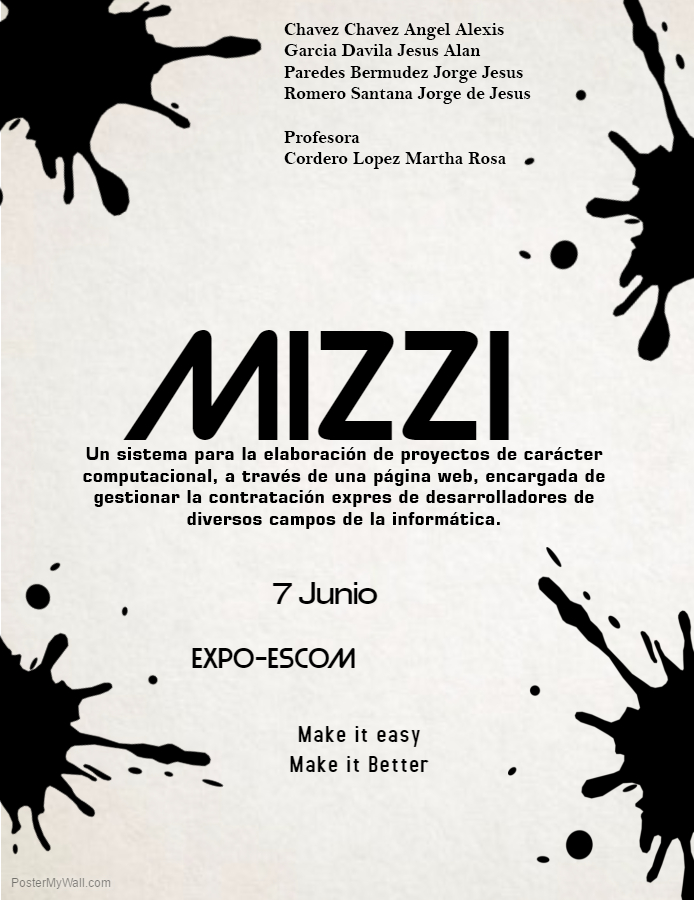
<style>
.page{position:relative;width:694px;height:900px}
.page>*{position:absolute;margin:0}
.t1{font:18px "BellMTBold";color:#000000}
.t2{font:18px "Square721BT-Bold";color:#000000}
</style>
<div class="page">
<p class="t1" style="left:284px;top:23px;width:247px;height:146px"><span class="t2"><br></span>Chavez Chavez Angel Alexis<br>Garcia Davila Jesus Alan<br>Paredes Bermudez Jorge Jesus<br>Romero Santana Jorge de Jesus<br><br>Profesora<br>Cordero Lopez Martha Rosa</p>
<p class="t2" style="left:83px;top:447px;width:522px;height:82px;text-align:center">Un sistema para la elaboración de proyectos de carácter computacional, a través de una página web, encargada de gestionar la contratación expres de desarrolladores de diversos campos de la informática.</p>
</div>
